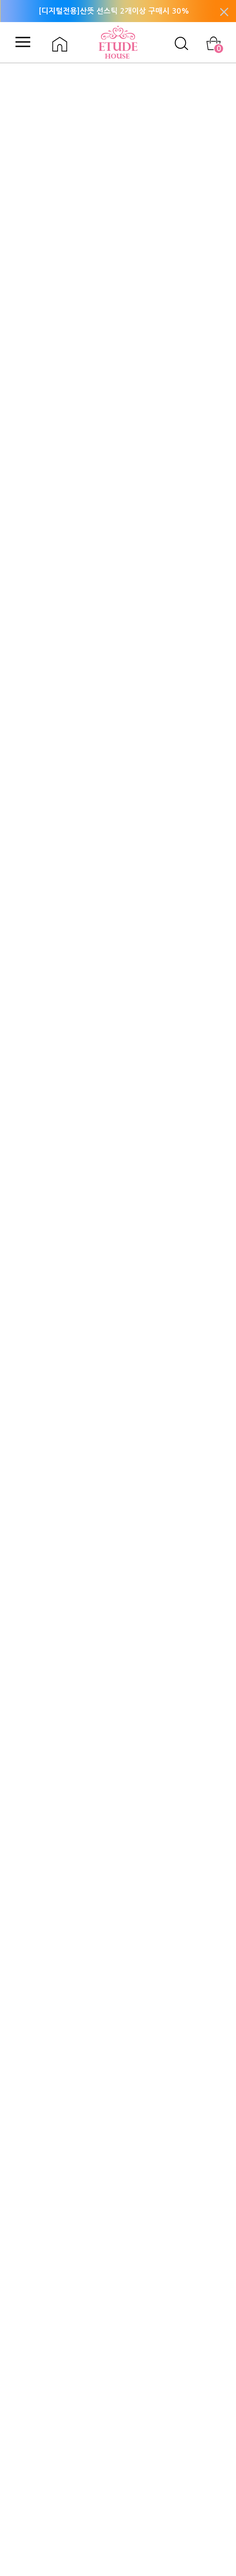
<style>
.page{position:relative;width:236px;height:2576px;background:#ffffff}
.page>*{position:absolute;margin:0}
.t1{font:7.4px "NanumGothicBold";letter-spacing:0.025em;color:#ffffff}
</style>
<div class="page">
<p class="t1" style="left:39px;top:7px;width:149px;height:8px">[디지털전용]산뜻 선스틱 2개이상 구매시 30%</p>
</div>
